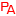
<style>
.page{position:relative;width:16px;height:16px;background:#ffffff}
.page>*{position:absolute;margin:0}
.t1{font:14px "EurostileRegular";color:#ff0000}
</style>
<div class="page">
<p class="t1" style="left:1px;top:2px;width:8px;height:9px">P</p>
<p class="t1" style="left:6px;top:5px;width:10px;height:9px">A</p>
</div>
